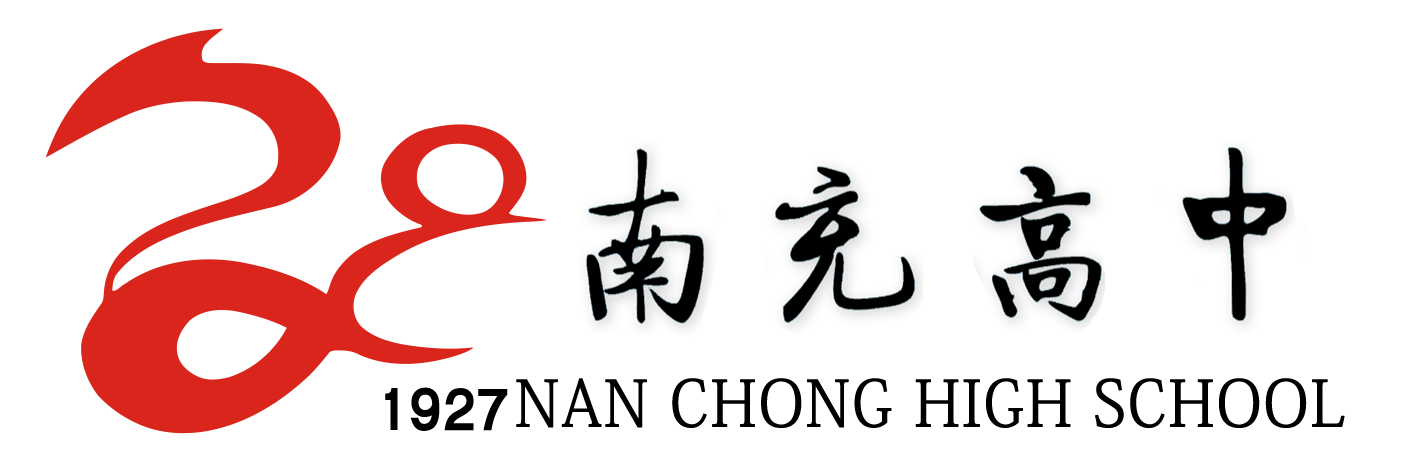
<style>
.page{position:relative;width:1417px;height:472px;background:#ffffff}
.page>*{position:absolute;margin:0}
.t1{font:67.7px "PingHei-Bold";color:#000000}
.t2{font:63.3px "AdobeFangsongStd-Regular";color:#000000;font-weight:bold}
</style>
<div class="page">
<p class="t1" style="left:385px;top:387px;width:123px;height:44px">1927</p>
<p class="t2" style="left:516px;top:378px;width:829px;height:50px">NAN CHONG HIGH SCHOOL</p>
</div>
